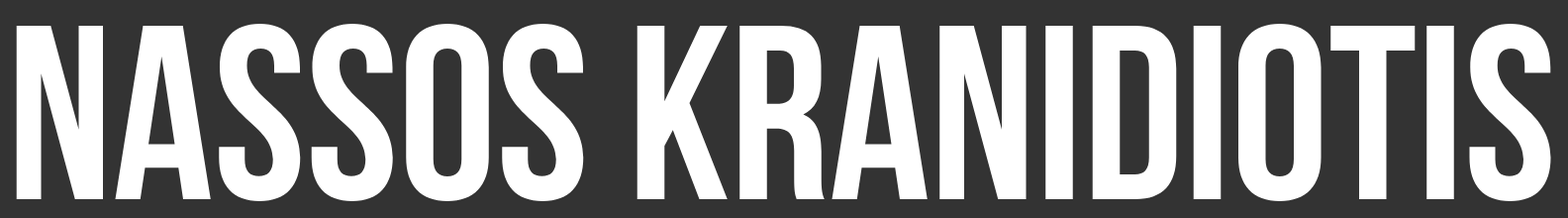
<style>
.page{position:relative;width:1568px;height:218px;background:#333333}
.page>*{position:absolute;margin:0}
.t1{font:247.5px "BebasNeueBold";color:#ffffff}
</style>
<div class="page">
<p class="t1" style="left:16px;top:24px;width:1535px;height:177px">NASSOS KRANIDIOTIS</p>
</div>
